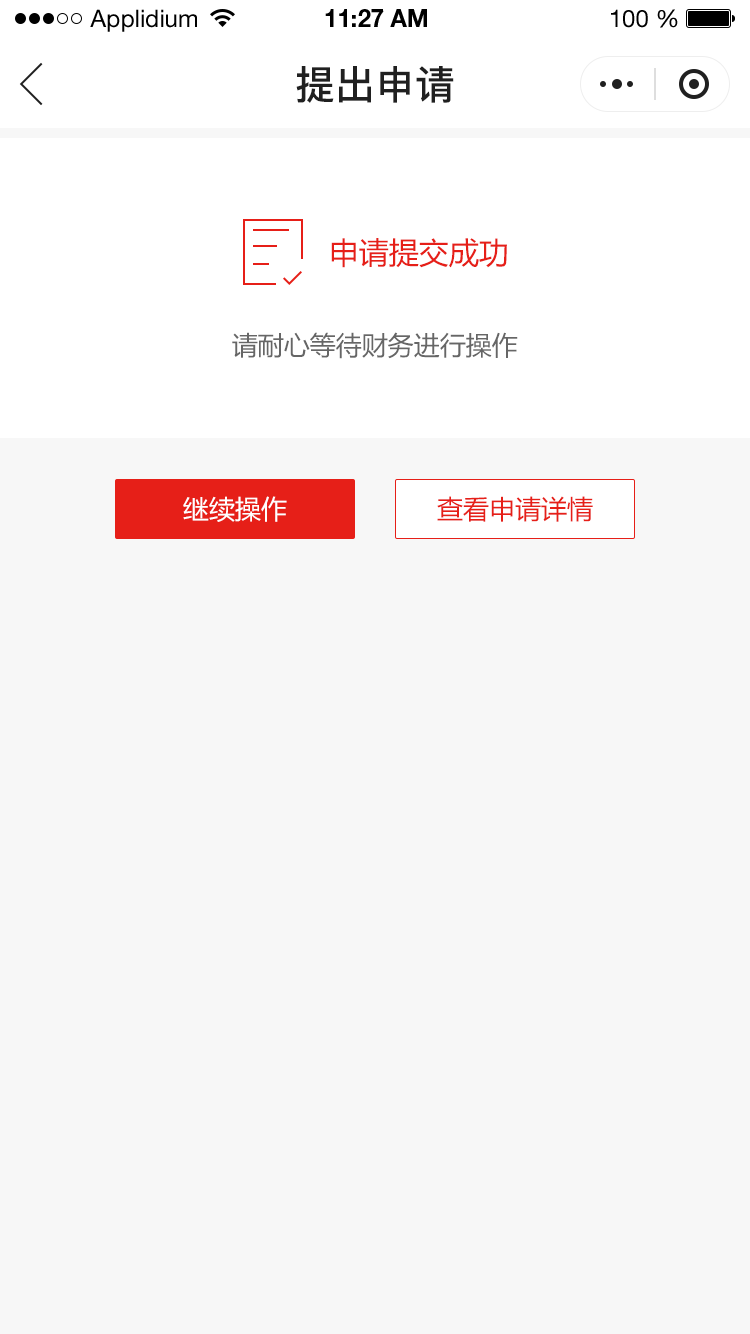
<style>
.page{position:relative;width:750px;height:1334px;background:#f7f7f7}
.page>*{position:absolute;margin:0}
.t1{font:24px "HelveticaNeueLTStd-Roman";color:#000000}
.t2{font:24px "HelveticaNeueLTStd-Bd";color:#000000}
.t3{font:40px "PingFang-SC-Bold";color:#202020;text-transform:uppercase}
.t4{font:30px "MicrosoftYaHei";color:#e61f18;text-transform:uppercase}
.t5{font:26px "MicrosoftYaHei";color:#666666;text-transform:uppercase}
.t6{font:26px "MicrosoftYaHei";color:#ffffff;text-transform:uppercase}
.t7{font:26px "MicrosoftYaHei";color:#e61f18;text-transform:uppercase}
</style>
<div class="page">
<p class="t1" style="left:90px;top:9px;width:107px;height:23px">Applidium</p>
<p class="t2" style="left:325px;top:9px;width:102px;height:18px">11:27 AM</p>
<p class="t1" style="left:611px;top:9px;width:67px;height:19px">100 %</p>
<p class="t3" style="left:296px;top:66px;width:158px;height:37px">提出申请</p>
<p class="t4" style="left:331px;top:238px;width:176px;height:30px">申请提交成功</p>
<p class="t5" style="left:232px;top:332px;width:286px;height:27px">请耐心等待财务进行操作</p>
<p class="t6" style="left:183px;top:496px;width:104px;height:26px">继续操作</p>
<p class="t7" style="left:437px;top:496px;width:156px;height:26px">查看申请详情</p>
</div>
